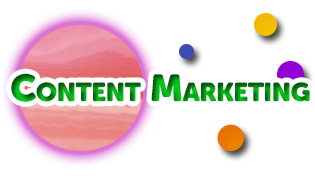
<style>
.page{position:relative;width:315px;height:176px;background:#ffffff}
.page>*{position:absolute;margin:0}
.t1{font:37.5px "MuseoSansRounded-1000";font-variant:small-caps}
</style>
<div class="page">
<p class="t1" style="left:11px;top:73px;width:299px;height:29px">Content Marketing</p>
</div>
